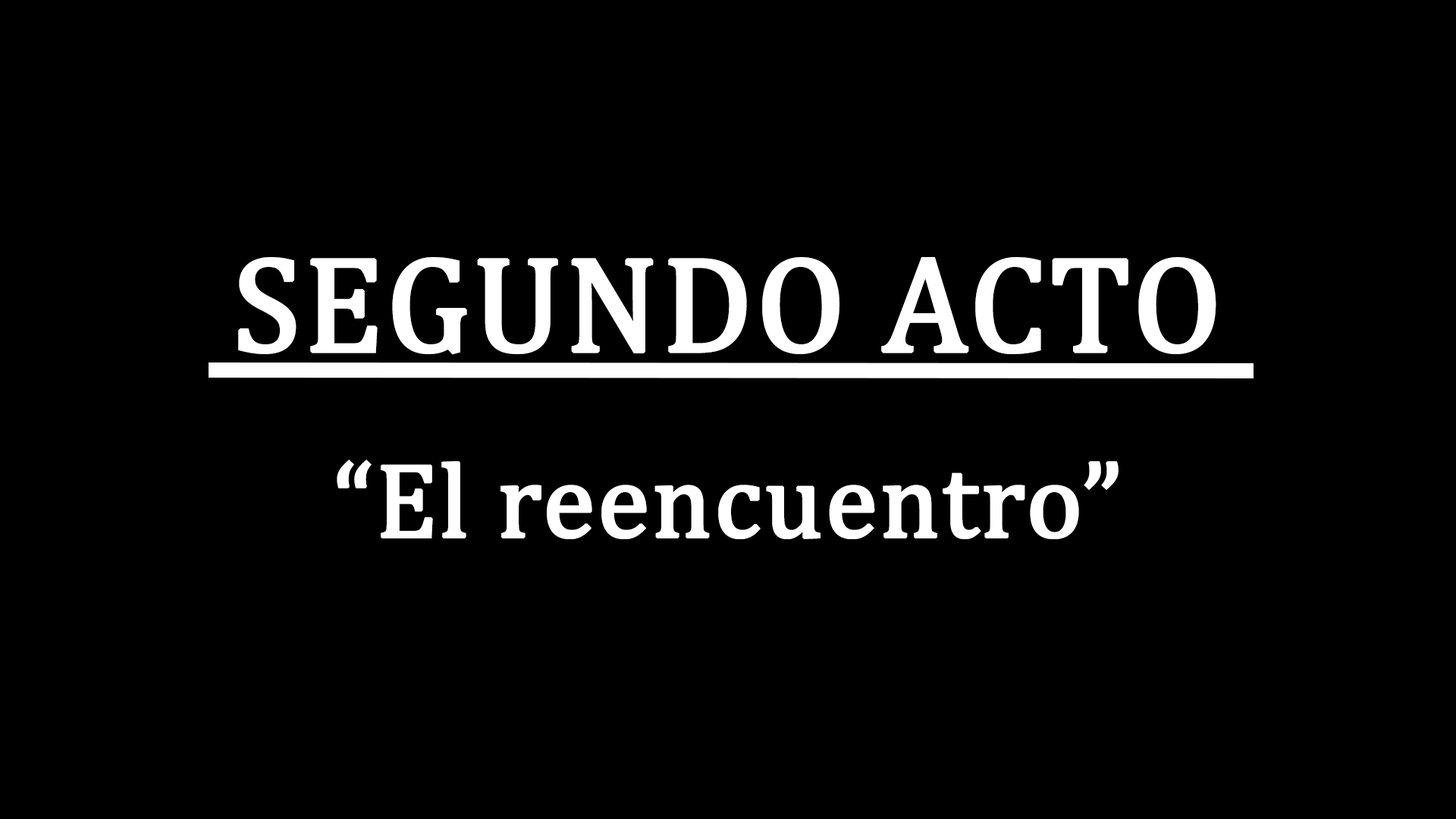
<style>
.page{position:relative;width:1456px;height:819px;background:#000000}
.page>*{position:absolute;margin:0}
.t1{font:136.5px "Cambria";color:#ffffff;font-weight:bold}
.t2{font:106.2px "Cambria";color:#ffffff;font-weight:bold}
</style>
<div class="page">
<p class="t1" style="left:238px;top:257px;width:978px;height:98px">SEGUNDO ACTO</p>
<p class="t2" style="left:337px;top:460px;width:782px;height:79px">“El reencuentro”</p>
</div>
